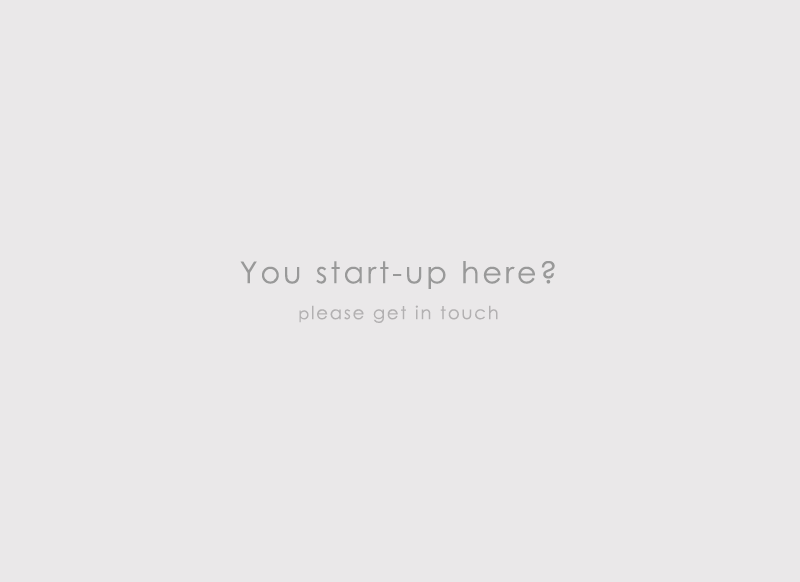
<style>
.page{position:relative;width:800px;height:582px;background:#eae8e9}
.page>*{position:absolute;margin:0}
.t1{font:30px/36px "CenturyGothic";letter-spacing:0.1em;color:#999999}
.t2{font:16px/36px "CenturyGothic";letter-spacing:0.1em;color:#b2b0b1}
.t3{font:18px/36px "CenturyGothic";letter-spacing:0.1em;color:#b2b0b1}
</style>
<div class="page">
<p class="t1" style="left:240px;top:261px;width:315px;height:62px;text-align:center">You start-up here?<br><span class="t2">p</span><span class="t3">lease get in touch</span></p>
</div>
